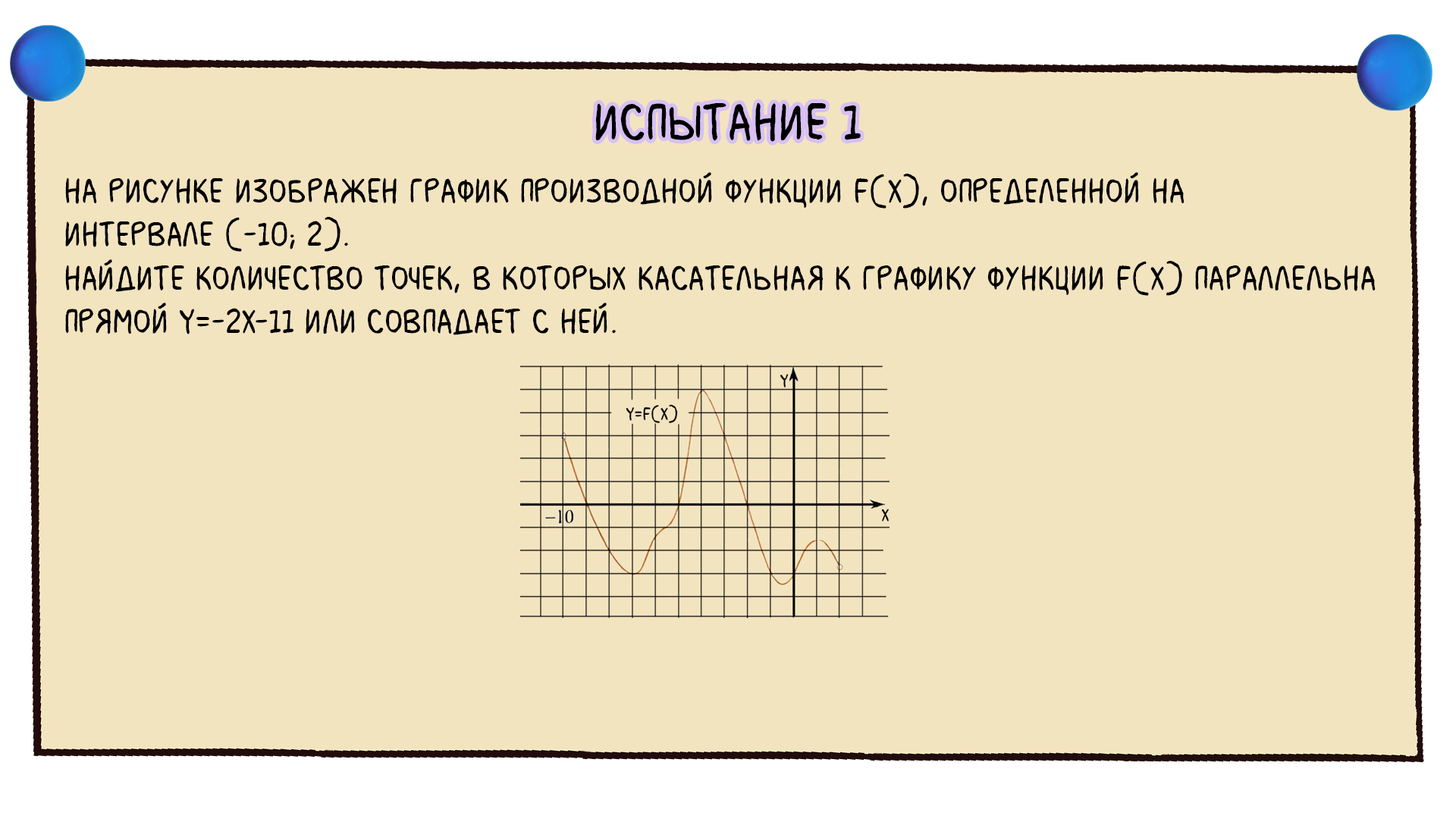
<style>
.page{position:relative;width:1456px;height:819px;background:#f3e4c0}
.page>*{position:absolute;margin:0}
.t1{font:54.6px "MilkMustacheBB";color:#000000}
.t2{font:36.4px "MilkMustacheBB";color:#000000}
</style>
<div class="page">
<p class="t1" style="left:595px;top:102px;width:266px;height:40px">испытание 1</p>
<p class="t2" style="left:65px;top:172px;width:1311px;height:163px">На рисунке изображен график производной функции f(x), определенной на <br>интервале (-10; 2). <br>Найдите количество точек, в которых касательная к графику функции f(x) параллельна <br>прямой y=-2x-11 или совпадает с ней.</p>
</div>
